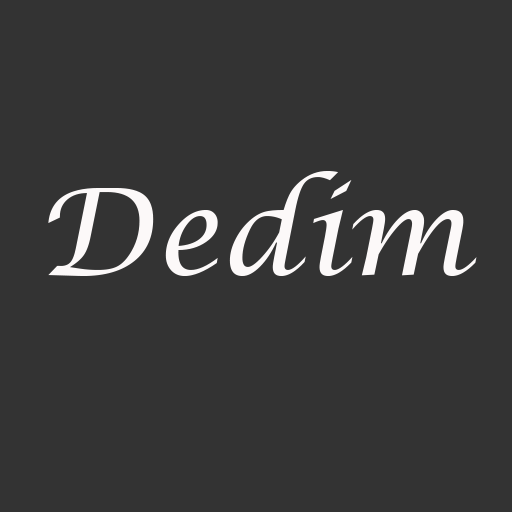
<style>
.page{position:relative;width:512px;height:512px;background:#333333}
.page>*{position:absolute;margin:0}
.t1{font:120.9px "LucidaCalligraphy-Italic";color:#fcf9f9}
</style>
<div class="page">
<p class="t1" style="left:48px;top:171px;width:429px;height:105px">Dedim</p>
</div>
